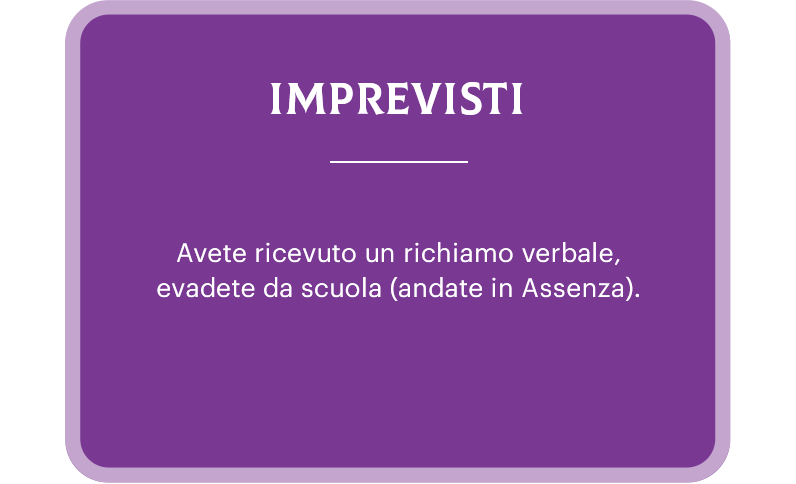
<style>
.page{position:relative;width:796px;height:484px;background:#793892}
.page>*{position:absolute;margin:0}
.t1{font:44px "Colus-Regular";letter-spacing:0.01em;color:#ffffff;text-transform:uppercase}
.t2{font:26px/35px "Graphik-Regular";letter-spacing:0.01em;color:#ffffff}
</style>
<div class="page">
<p class="t1" style="left:270px;top:82px;width:253px;height:33px">IMPREVISTI</p>
<p class="t2" style="left:157px;top:242px;width:482px;height:59px;text-align:center">Avete ricevuto un richiamo verbale, evadete da scuola (andate in Assenza).</p>
</div>
